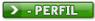
<style>
.page{position:relative;width:95px;height:21px}
.page>*{position:absolute;margin:0}
.t1{font:12px "BellGothicStd-Black";color:#edebeb}
</style>
<div class="page">
<p class="t1" style="left:27px;top:5px;width:51px;height:10px">- PERFIL</p>
</div>
